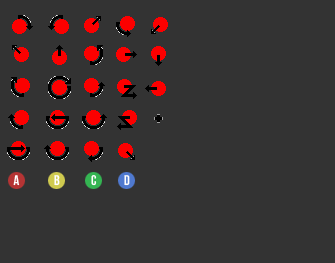
<style>
.page{position:relative;width:335px;height:263px;background:#333333}
.page>*{position:absolute;margin:0}
.t1{font:14px "BebasNeue";color:#ffffff}
</style>
<div class="page">
<p class="t1" style="left:13px;top:175px;width:7px;height:11px">A</p>
<p class="t1" style="left:54px;top:175px;width:6px;height:11px">B</p>
<p class="t1" style="left:91px;top:175px;width:6px;height:11px">CC</p>
<p class="t1" style="left:124px;top:175px;width:6px;height:11px">D</p>
</div>
